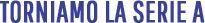
<style>
.page{position:relative;width:205px;height:23px;background:#ffffff}
.page>*{position:absolute;margin:0}
.t1{font:30px "PathwayGothicOne-Book";color:#38409a;text-transform:uppercase;font-weight:bold}
</style>
<div class="page">
<p class="t1" style="left:0px;top:0px;width:205px;height:23px">TORNiAmo LA SERIE A</p>
</div>
